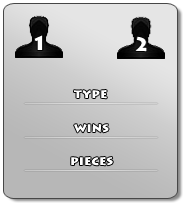
<style>
.page{position:relative;width:183px;height:207px}
.page>*{position:absolute;margin:0}
.t1{font:13px "LithosPro-Black";color:#ffffff}
</style>
<div class="page">
<p class="t1" style="left:74px;top:90px;width:33px;height:9px">type</p>
<p class="t1" style="left:74px;top:124px;width:35px;height:9px">wins</p>
<p class="t1" style="left:71px;top:157px;width:42px;height:9px">pieces</p>
</div>
